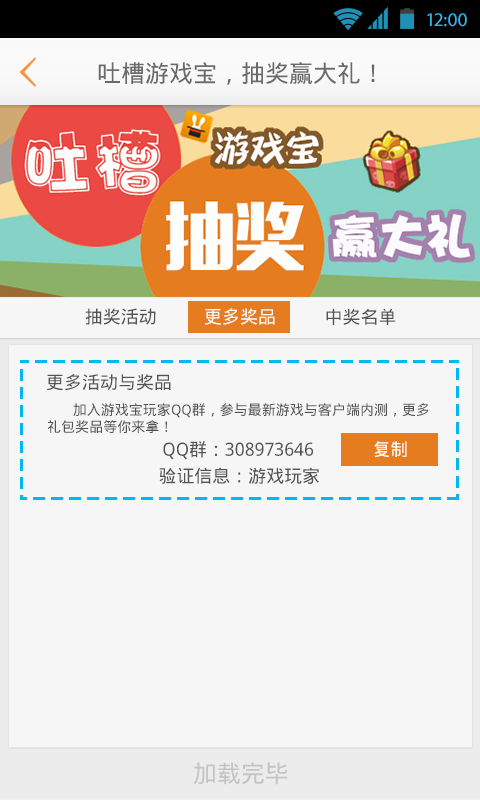
<style>
.page{position:relative;width:480px;height:800px;background:#f6f6f6}
.page>*{position:absolute;margin:0}
.t1{font:19.4px "MyriadPro-Regular";color:#33b5e5}
.t2{font:24px "DroidSansFallback";color:#6a6a6a}
.t3{font:18px "DroidSansFallback";color:#535353}
.t4{font:18px "DroidSansFallback";color:#fcfbfb}
.t5{font:17.8px "DroidSansFallback";color:#535353}
.t6{font:14.2px "DroidSansFallback";color:#535353}
.t7{font:18.2px "DroidSansFallback";color:#535353}
.t8{font:17.8px "DroidSansFallback";color:#fdffff}
.t9{font:24px "DroidSansFallback";color:#c4c4c4}
</style>
<div class="page">
<p class="t1" style="left:427px;top:13px;width:40px;height:14px">12:00</p>
<p class="t2" style="left:98px;top:62px;width:277px;height:23px">吐槽游戏宝，抽奖赢大礼！</p>
<p class="t3" style="left:85px;top:308px;width:71px;height:17px">抽奖活动</p>
<p class="t4" style="left:205px;top:308px;width:70px;height:17px">更多奖品</p>
<p class="t5" style="left:326px;top:308px;width:70px;height:17px">中奖名单</p>
<p class="t5" style="left:47px;top:374px;width:124px;height:17px">更多活动与奖品</p>
<p class="t6" style="left:47px;top:403px;width:382px;height:30px">加入游戏宝玩家QQ群，参与最新游戏与客户端内测，更多<br>礼包奖品等你来拿！</p>
<p class="t7" style="left:163px;top:441px;width:150px;height:19px">QQ群：308973646</p>
<p class="t8" style="left:374px;top:441px;width:33px;height:17px">复制</p>
<p class="t3" style="left:159px;top:467px;width:160px;height:17px">验证信息：游戏玩家</p>
<p class="t9" style="left:193px;top:762px;width:95px;height:23px">加载完毕</p>
</div>
